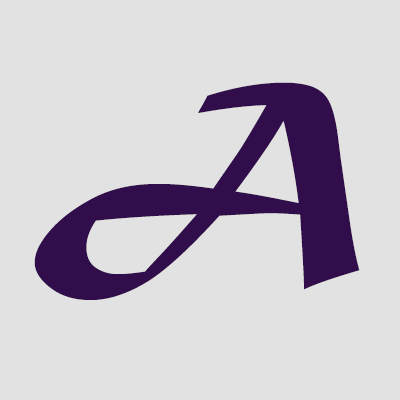
<style>
.page{position:relative;width:400px;height:400px;background:#e2e2e2}
.page>*{position:absolute;margin:0}
.t1{font:250px "MaturaMTScriptCapitals";color:#320d4b}
</style>
<div class="page">
<p class="t1" style="left:34px;top:82px;width:326px;height:218px">A</p>
</div>
